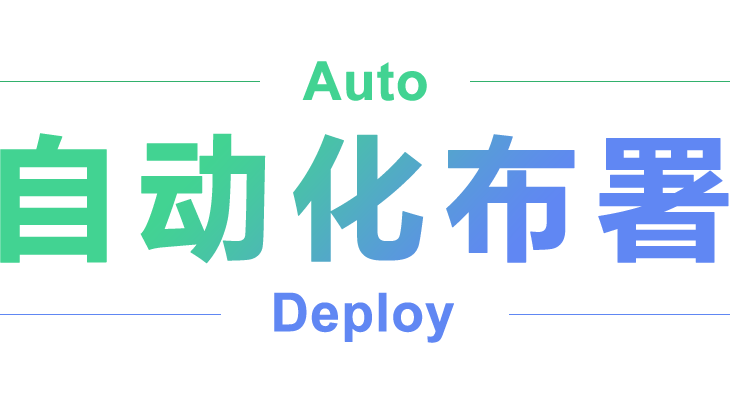
<style>
.page{position:relative;width:730px;height:400px;background:#ffffff}
.page>*{position:absolute;margin:0}
.t1{font:53.2px "Arial-BoldMT";color:#42d392;font-weight:bold}
.t2{font:133px "MicrosoftYaHei-Bold";letter-spacing:0.12em;font-weight:bold}
.t3{font:53.2px "Arial-BoldMT";color:#6087f3;font-weight:bold}
</style>
<div class="page">
<p class="t1" style="left:302px;top:61px;width:125px;height:40px">Auto</p>
<p class="t2" style="left:0px;top:133px;width:729px;height:131px">自动化布署</p>
<p class="t3" style="left:274px;top:292px;width:180px;height:51px">Deploy</p>
</div>
